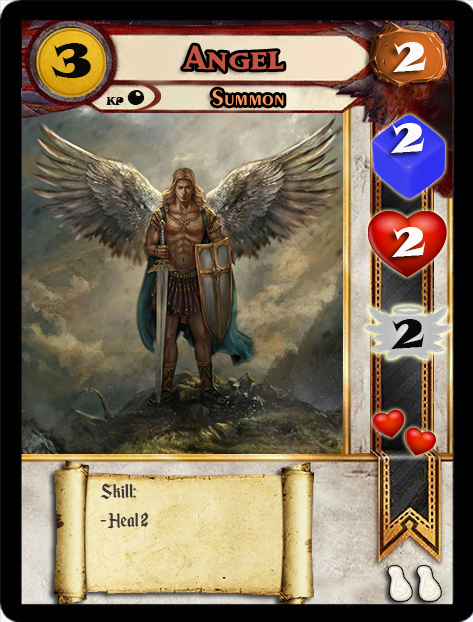
<style>
.page{position:relative;width:473px;height:622px}
.page>*{position:absolute;margin:0}
.t1{font:46.6px "SnapITC-Regular";color:#090909;scale:1.05 1}
.t2{font:40px "MatrixBoldSmallCaps";color:#c25443;scale:1.06 1}
.t3{font:40px "SnapITC-Regular";color:#fef9f9;scale:1.05 1}
.t4{font:22.7px "Exotic350BT-DemiBold";color:#f89c64;scale:1.06 1}
.t5{font:20.5px "SnapITC-Regular";color:#090909}
.t6{font:40px "SnapITC-Regular";color:#090909;scale:1.05 1}
.t7{font:24px "EnchantedLand";color:#3e3939}
</style>
<div class="page">
<p class="t1" style="left:51px;top:43px;width:40px;height:35px">3</p>
<p class="t2" style="left:183px;top:45px;width:101px;height:27px">Angel</p>
<p class="t3" style="left:393px;top:42px;width:34px;height:30px">2</p>
<p class="t4" style="left:212px;top:89px;width:72px;height:17px">Summon</p>
<p class="t5" style="left:127px;top:90px;width:18px;height:15px">0</p>
<p class="t3" style="left:391px;top:123px;width:34px;height:30px">2</p>
<p class="t3" style="left:392px;top:227px;width:34px;height:30px">2</p>
<p class="t6" style="left:391px;top:319px;width:34px;height:30px">2</p>
<p class="t7" style="left:100px;top:483px;width:49px;height:46px">Skill:<br>- Heal 2</p>
</div>
